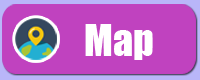
<style>
.page{position:relative;width:200px;height:80px;background:#c042bf}
.page>*{position:absolute;margin:0}
.t1{font:40px "Impact";color:#ffffff}
</style>
<div class="page">
<p class="t1" style="left:85px;top:24px;width:68px;height:36px">Map</p>
</div>
